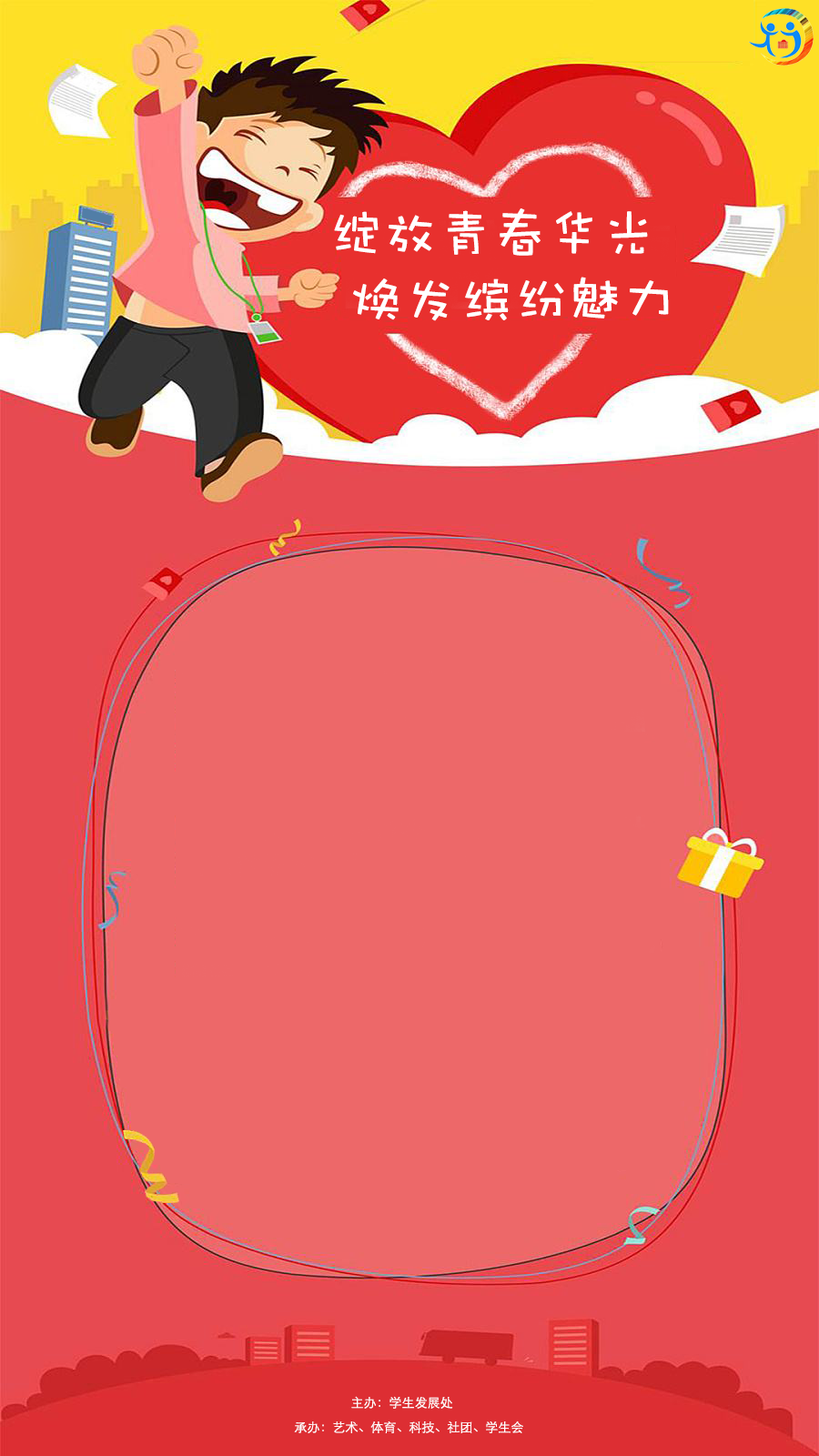
<style>
.page{position:relative;width:819px;height:1456px;background:#ed6869}
.page>*{position:absolute;margin:0}
.t1{font:54.6px "DFWaWaSC-W5";color:#ffffff}
.t2{font:12.7px "STHeitiSC-Light";color:#ffffff}
</style>
<div class="page">
<p class="t1" style="left:334px;top:208px;width:314px;height:48px">绽放青春华光</p>
<p class="t1" style="left:353px;top:277px;width:316px;height:44px">焕发缤纷魅力</p>
<p class="t2" style="left:351px;top:1396px;width:102px;height:13px">主办：学生发展处</p>
<p class="t2" style="left:294px;top:1420px;width:229px;height:13px">承办：艺术、体育、科技、社团、学生会</p>
</div>
